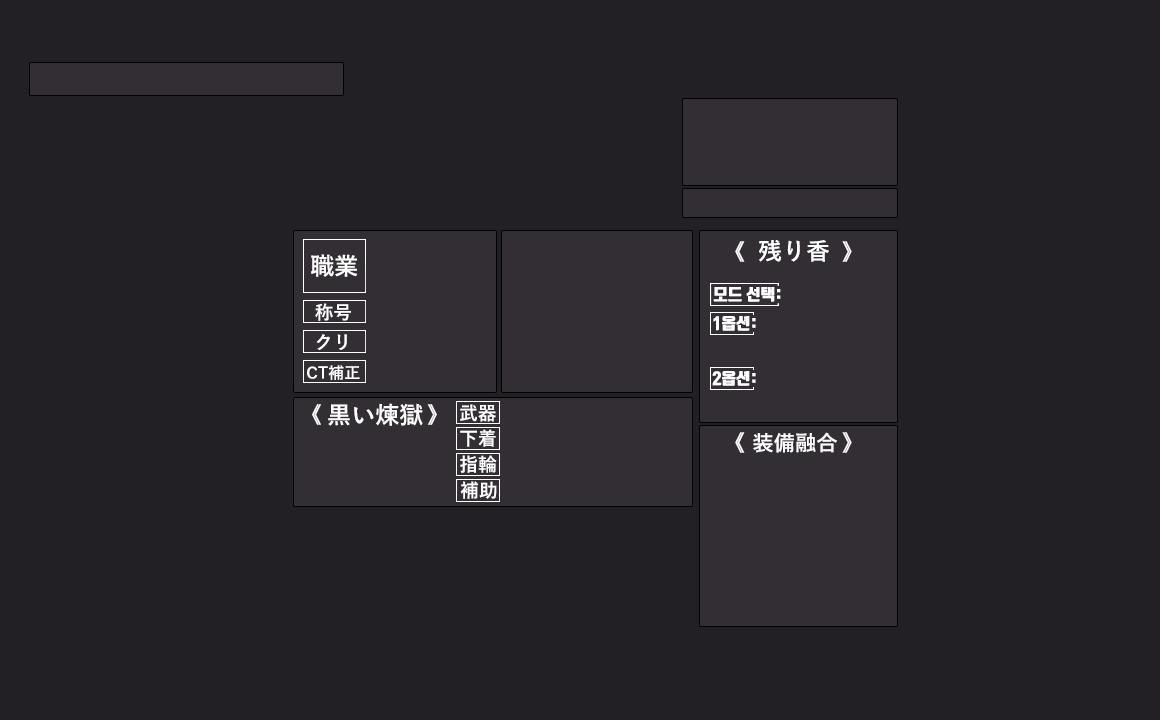
<style>
.page{position:relative;width:1160px;height:720px;background:#222025}
.page>*{position:absolute;margin:0}
.t1{font:24px "YuGothic-Bold";color:#ffffff}
.t2{font:18.7px "YuGothic-Bold";color:#ffffff}
.t3{font:16px "YuGothic-Bold";color:#ffffff}
.t4{font:21.3px "YuGothic-Bold";color:#ffffff}
</style>
<div class="page">
<p class="t1" style="left:759px;top:240px;width:70px;height:22px">残り香</p>
<p class="t1" style="left:311px;top:254px;width:47px;height:23px">職業</p>
<p class="t2" style="left:315px;top:303px;width:36px;height:18px">称号</p>
<p class="t2" style="left:316px;top:334px;width:31px;height:16px">クリ</p>
<p class="t3" style="left:307px;top:365px;width:53px;height:15px">CT補正</p>
<p class="t1" style="left:328px;top:403px;width:95px;height:23px">黒い煉獄</p>
<p class="t2" style="left:460px;top:404px;width:36px;height:18px">武器</p>
<p class="t2" style="left:460px;top:429px;width:36px;height:18px">下着</p>
<p class="t4" style="left:753px;top:432px;width:84px;height:21px">装備融合</p>
<p class="t2" style="left:460px;top:455px;width:37px;height:18px">指輪</p>
<p class="t2" style="left:460px;top:481px;width:37px;height:18px">補助</p>
</div>
